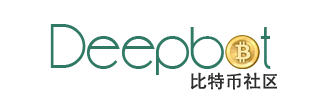
<style>
.page{position:relative;width:321px;height:95px;background:#ffffff}
.page>*{position:absolute;margin:0}
.t1{font:60px "FeenaCasual";color:#2f7965}
.t2{font:18px "AdobeHeitiStd-Regular";color:#2c2c2c}
</style>
<div class="page">
<p class="t1" style="left:50px;top:24px;width:221px;height:51px">Deepbot</p>
<p class="t2" style="left:191px;top:72px;width:86px;height:18px">比特币社区</p>
</div>
